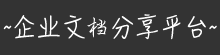
<style>
.page{position:relative;width:220px;height:55px;background:#333333}
.page>*{position:absolute;margin:0}
.t1{font:24px "HanziPenTC-W3";color:#ffffff}
.t2{font:24px "STXingkaiSC-Light";color:#ffffff}
</style>
<div class="page">
<p class="t1" style="left:3px;top:14px;width:214px;height:26px">~企业文<span class="t2">档</span>分享平台~</p>
</div>
